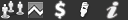
<style>
.page{position:relative;width:128px;height:20px;background:#333333}
.page>*{position:absolute;margin:0}
.t1{font:20.6px "MyriadPro-Bold";color:#ffffff}
</style>
<div class="page">
<p class="t1" style="left:55px;top:1px;width:10px;height:18px;rotate:3deg">$</p>
</div>
